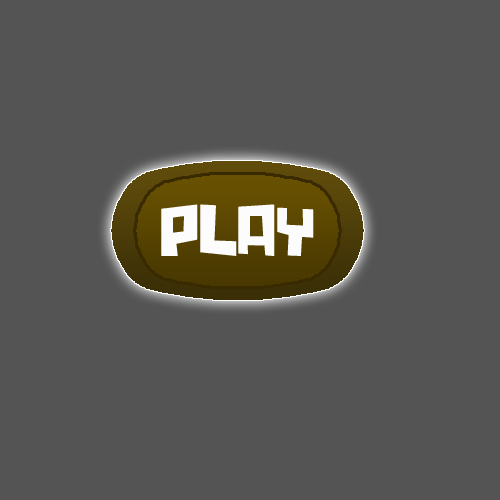
<style>
.page{position:relative;width:500px;height:500px;background:#555454}
.page>*{position:absolute;margin:0}
.t1{font:72px "Chunq";color:#fcfcfc;scale:0.94 1}
</style>
<div class="page">
<p class="t1" style="left:161px;top:204px;width:153px;height:52px">PLAY</p>
</div>
